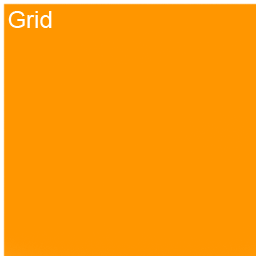
<style>
.page{position:relative;width:256px;height:256px;background:#ff9600}
.page>*{position:absolute;margin:0}
.t1{font:24px "ArialMT";color:#ffffff}
</style>
<div class="page">
<p class="t1" style="left:8px;top:11px;width:44px;height:17px">Grid</p>
</div>
